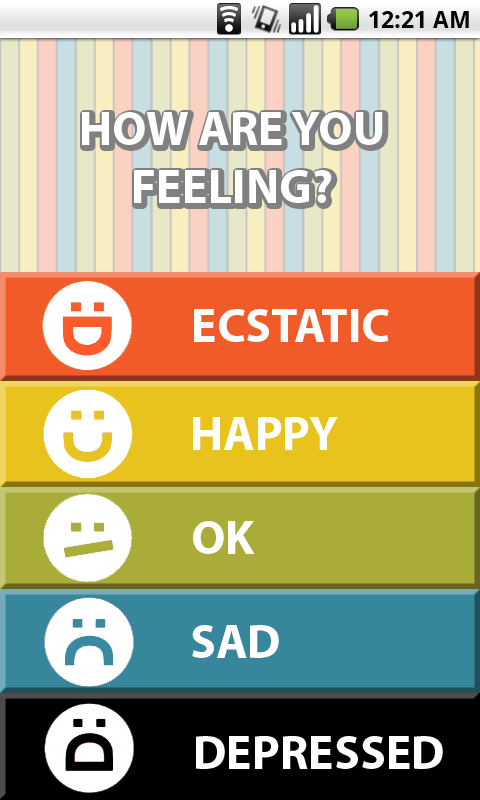
<style>
.page{position:relative;width:480px;height:800px}
.page>*{position:absolute;margin:0}
.t1{font:48px "MyriadPro-Bold";color:#ffffff}
</style>
<div class="page">
<p class="t1" style="left:82px;top:112px;width:301px;height:91px;text-align:center">HOW ARE YOU<br>FEELING?</p>
<p class="t1" style="left:194px;top:309px;width:195px;height:33px">ECSTATIC</p>
<p class="t1" style="left:193px;top:417px;width:145px;height:33px">HAPPY</p>
<p class="t1" style="left:193px;top:521px;width:62px;height:33px">OK</p>
<p class="t1" style="left:192px;top:625px;width:87px;height:33px">SAD</p>
<p class="t1" style="left:196px;top:736px;width:247px;height:33px">DEPRESSED</p>
</div>
